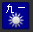
<style>
.page{position:relative;width:33px;height:32px;background:#000090}
.page>*{position:absolute;margin:0}
.t1{font:10.4px "SimSun";color:#ffffff}
</style>
<div class="page">
<p class="t1" style="left:6px;top:4px;width:19px;height:9px">九一</p>
</div>
